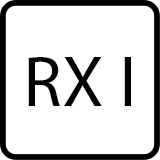
<style>
.page{position:relative;width:160px;height:160px;background:#ffffff}
.page>*{position:absolute;margin:0}
.t1{font:72.3px "MyriadPro-Regular";color:#000000}
</style>
<div class="page">
<p class="t1" style="left:28px;top:57px;width:103px;height:49px">RX I</p>
</div>
